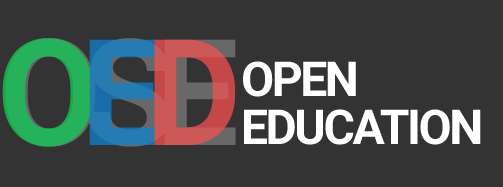
<style>
.page{position:relative;width:503px;height:187px;background:#333333}
.page>*{position:absolute;margin:0}
.t1{font:148px "Roboto-Bold";letter-spacing:-0.125em;color:#19a74b}
.t2{font:148px "Roboto-Bold";letter-spacing:-0.125em;color:#196ca7}
.t3{font:148px "Roboto-Bold";letter-spacing:-0.125em;color:#c64747}
.t4{font:48px/48px "Roboto-Bold";letter-spacing:-0.05em;color:#ffffff}
</style>
<div class="page">
<p class="t1" style="left:2px;top:38px;width:233px;height:109px">O<span class="t2">E</span><span class="t3">D</span></p>
<p class="t4" style="left:243px;top:61px;width:238px;height:84px">OPEN<br>EDUCATION</p>
</div>
